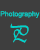
<style>
.page{position:relative;width:40px;height:50px;background:#3e3e3e}
.page>*{position:absolute;margin:0}
.t1{font:6.9px "ArialMT";color:#00d4cd}
.t2{font:25px "Vivaldii";color:#00d4cd;scale:0.86 1}
</style>
<div class="page">
<p class="t1" style="left:0px;top:11px;width:40px;height:7px">Photography</p>
<p class="t2" style="left:10px;top:23px;width:19px;height:20px">P</p>
</div>
